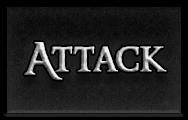
<style>
.page{position:relative;width:188px;height:120px}
.page>*{position:absolute;margin:0}
.t1{font:40px "RingbearerMedium";letter-spacing:0.01em;font-weight:bold}
</style>
<div class="page">
<p class="t1" style="left:24px;top:42px;width:143px;height:38px">Attack</p>
</div>
